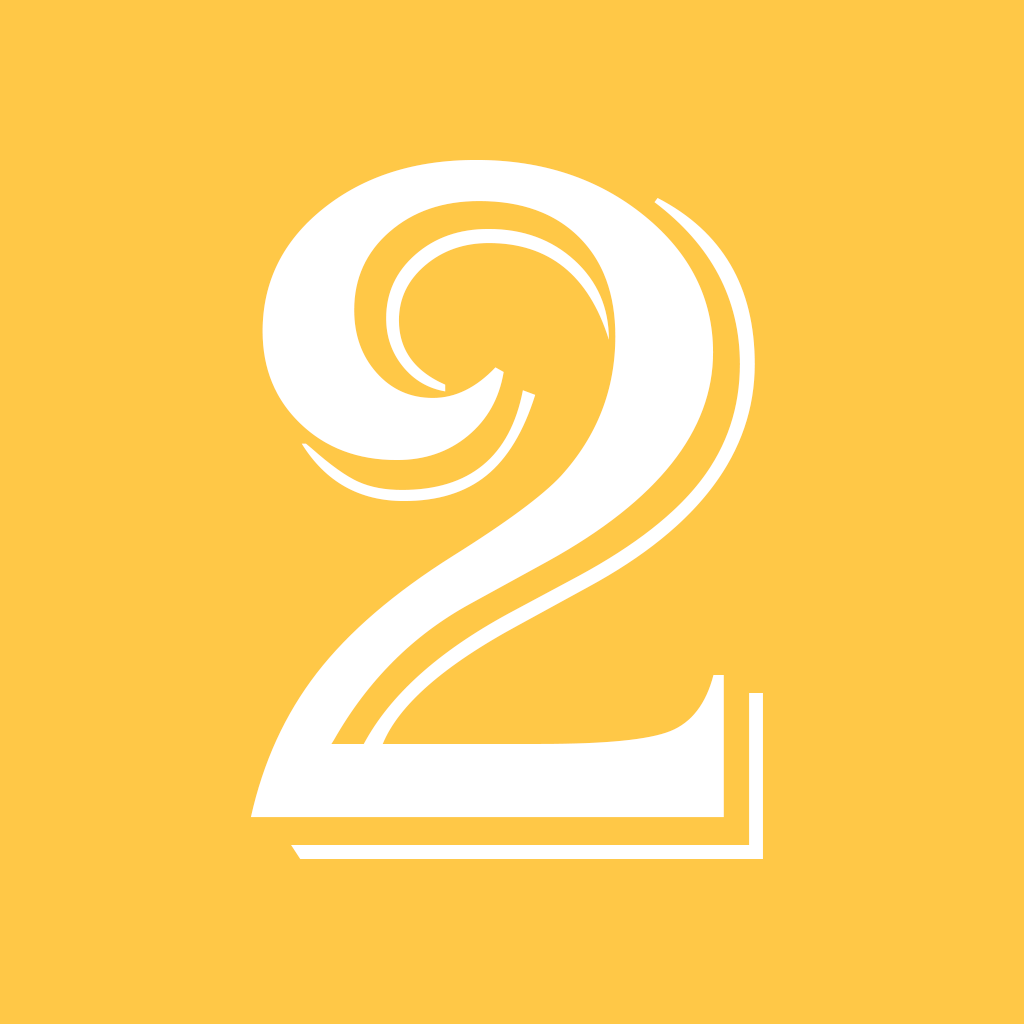
<style>
.page{position:relative;width:1024px;height:1024px;background:#ffc847}
.page>*{position:absolute;margin:0}
.t1{font:1041px "Algerian";color:#ffffff}
</style>
<div class="page">
<p class="t1" style="left:250px;top:160px;width:513px;height:699px">2</p>
</div>
